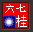
<style>
.page{position:relative;width:33px;height:32px;background:#f20000}
.page>*{position:absolute;margin:0}
.t1{font:10.4px "SimSun";color:#ffffff}
.t2{font:11.7px "SimSun";color:#ffffff}
</style>
<div class="page">
<p class="t1" style="left:5px;top:4px;width:21px;height:9px">六七</p>
<p class="t2" style="left:16px;top:15px;width:11px;height:12px">桂</p>
</div>
